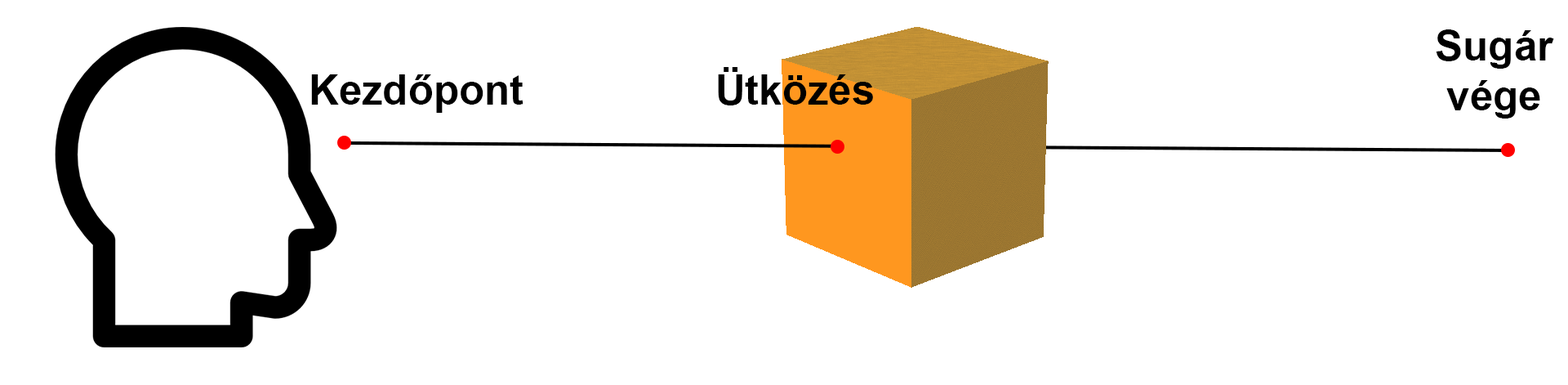
<style>
.page{position:relative;width:1568px;height:385px;background:#ffffff}
.page>*{position:absolute;margin:0}
.t1{font:41.6px "Arial-BoldMT";color:#000000}
</style>
<div class="page">
<p class="t1" style="left:1436px;top:29px;width:118px;height:89px;text-align:center">Sugár vége</p>
<p class="t1" style="left:311px;top:74px;width:212px;height:39px">Kezdőpont</p>
<p class="t1" style="left:718px;top:67px;width:155px;height:38px">Ütközés</p>
</div>
